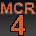
<style>
.page{position:relative;width:36px;height:36px}
.page>*{position:absolute;margin:0}
.t1{font:15px "Arial-BoldMT"}
.t2{font:28px "Arial-BoldMT";color:#d85d28}
</style>
<div class="page">
<p class="t1" style="left:1px;top:2px;width:34px;height:11px">MCR</p>
<p class="t2" style="left:11px;top:15px;width:14px;height:20px">4</p>
</div>
